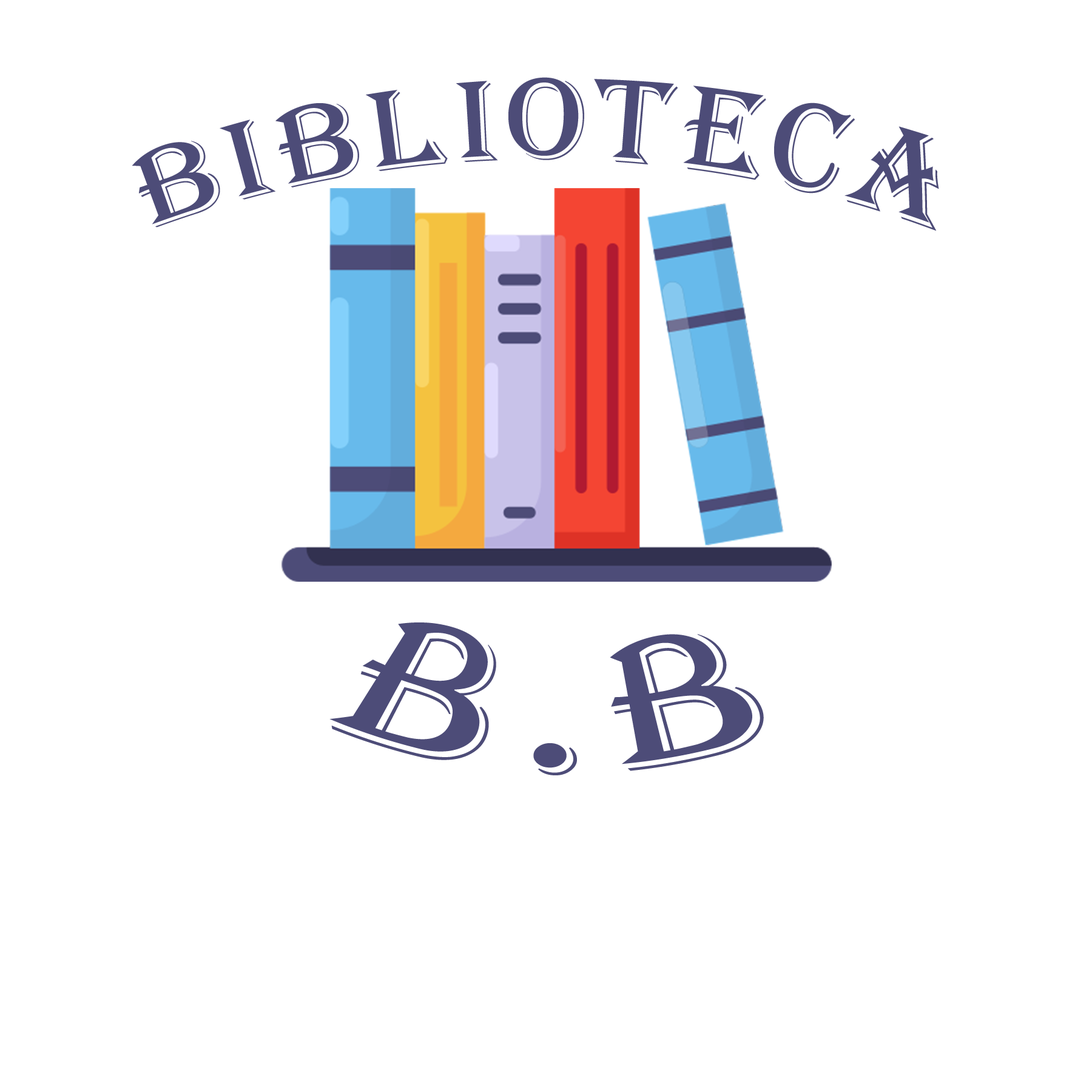
<style>
.page{position:relative;width:1092px;height:1092px;background:#ffffff}
.page>*{position:absolute;margin:0}
.t1{font:121.3px "Algerian";letter-spacing:0.1em;color:#4d4c78;text-transform:uppercase}
.t2{font:182px "Algerian";letter-spacing:0.1em;color:#4d4c78;text-transform:uppercase}
</style>
<div class="page">
<p class="t1" style="left:132px;top:77px;width:807px;height:154px">biblioteca</p>
<p class="t2" style="left:329px;top:622px;width:435px;height:153px">B.B</p>
</div>
